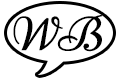
<style>
.page{position:relative;width:120px;height:80px;background:#ffffff}
.page>*{position:absolute;margin:0}
.t1{font:48px "Niconne-Regular";color:#000000}
</style>
<div class="page">
<p class="t1" style="left:13px;top:15px;width:90px;height:37px">WB</p>
</div>
